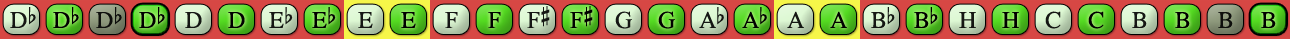
<style>
.page{position:relative;width:1290px;height:39px}
.page>*{position:absolute;margin:0}
.t1{font:24px "OpusChords";color:#000000}
.t2{font:24px "OpusChords";letter-spacing:-0.05em;color:#000000}
</style>
<div class="page">
<p class="t1" style="left:527px;top:6px;width:23px;height:22px;opacity:0.9">F#</p>
<p class="t1" style="left:570px;top:6px;width:23px;height:22px">F#</p>
<p class="t1" style="left:10px;top:7px;width:26px;height:21px;opacity:0.9">Db</p>
<p class="t1" style="left:53px;top:7px;width:26px;height:21px">Db</p>
<p class="t1" style="left:96px;top:7px;width:26px;height:21px;opacity:0.9">Db</p>
<p class="t1" style="left:139px;top:7px;width:26px;height:21px">Db</p>
<p class="t1" style="left:185px;top:12px;width:17px;height:16px;opacity:0.9">D</p>
<p class="t1" style="left:228px;top:12px;width:17px;height:16px">D</p>
<p class="t1" style="left:269px;top:7px;width:24px;height:21px;opacity:0.9">Eb</p>
<p class="t1" style="left:312px;top:7px;width:24px;height:21px">Eb</p>
<p class="t1" style="left:358px;top:12px;width:15px;height:16px;opacity:0.9">E</p>
<p class="t1" style="left:401px;top:12px;width:15px;height:16px">E</p>
<p class="t1" style="left:445px;top:12px;width:13px;height:16px;opacity:0.9">F</p>
<p class="t1" style="left:488px;top:12px;width:13px;height:16px">F</p>
<p class="t1" style="left:615px;top:11px;width:17px;height:18px;opacity:0.9">G</p>
<p class="t1" style="left:658px;top:11px;width:17px;height:18px">G</p>
<p class="t2" style="left:699px;top:7px;width:25px;height:21px;opacity:0.9">Ab</p>
<p class="t2" style="left:742px;top:7px;width:25px;height:21px">Ab</p>
<p class="t1" style="left:787px;top:11px;width:17px;height:17px;opacity:0.9">A</p>
<p class="t1" style="left:830px;top:11px;width:17px;height:17px">A</p>
<p class="t1" style="left:871px;top:7px;width:24px;height:21px;opacity:0.9">Bb</p>
<p class="t1" style="left:914px;top:7px;width:24px;height:21px">Bb</p>
<p class="t1" style="left:959px;top:12px;width:17px;height:16px;opacity:0.9">H</p>
<p class="t1" style="left:1002px;top:12px;width:17px;height:16px">H</p>
<p class="t1" style="left:1045px;top:11px;width:16px;height:18px;opacity:0.9">C</p>
<p class="t1" style="left:1088px;top:11px;width:16px;height:18px">C</p>
<p class="t1" style="left:1132px;top:12px;width:15px;height:16px;opacity:0.9">B</p>
<p class="t1" style="left:1175px;top:12px;width:15px;height:16px">B</p>
<p class="t1" style="left:1218px;top:12px;width:15px;height:16px;opacity:0.9">B</p>
<p class="t1" style="left:1261px;top:12px;width:15px;height:16px">B</p>
</div>
